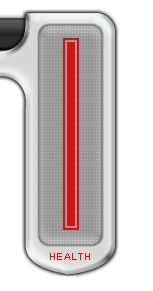
<style>
.page{position:relative;width:153px;height:291px;background:#ffffff}
.page>*{position:absolute;margin:0}
.t1{font:10px "ArialMT";letter-spacing:0.025em;color:#d71111}
</style>
<div class="page">
<p class="t1" style="left:50px;top:253px;width:40px;height:7px">HEALTH</p>
</div>
